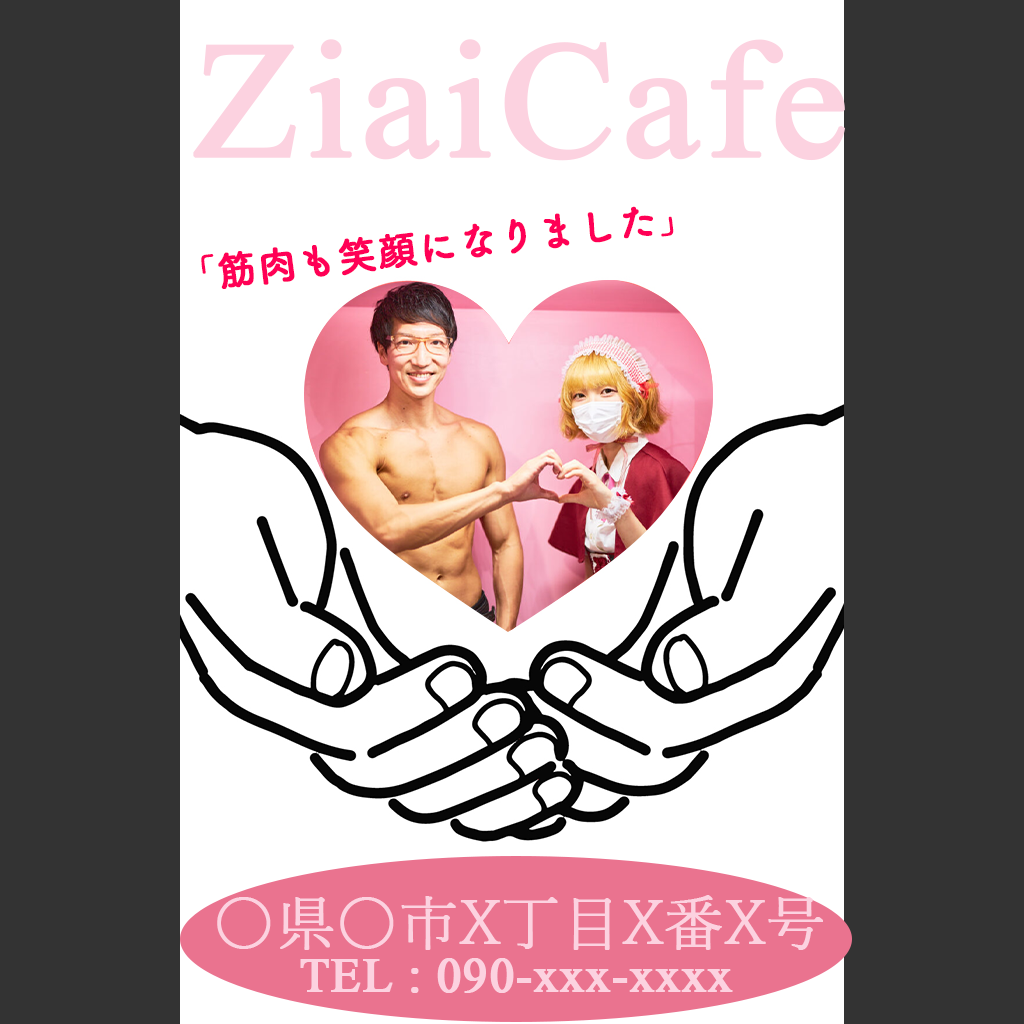
<style>
.page{position:relative;width:1024px;height:1024px;background:#ffffff}
.page>*{position:absolute;margin:0}
.t1{font:247.5px "Microsoft-Himalaya";color:#fcd2e0;font-weight:bold;scale:1.05 1}
.t2{font:39.2px "TsukuBRdGothicStd-B";color:#ff0056;font-weight:bold}
.t3{font:60px "YuMincho-Light";color:#fcd2e0;font-weight:bold}
.t4{font:72.1px "Microsoft-Himalaya";color:#fcd2e0;font-weight:bold}
</style>
<div class="page">
<p class="t1" style="left:193px;top:39px;width:652px;height:122px">ZiaiCafe</p>
<p class="t2" style="left:201px;top:206px;width:473px;height:83px;rotate:-7deg">「筋肉も笑顔になりました」</p>
<p class="t3" style="left:217px;top:895px;width:606px;height:55px">〇県〇市X丁目X番X号</p>
<p class="t4" style="left:300px;top:958px;width:433px;height:35px">TEL : 090-xxx-xxxx</p>
</div>
